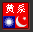
<style>
.page{position:relative;width:33px;height:32px;background:#333333}
.page>*{position:absolute;margin:0}
.t1{font:10.4px "SimSun";color:#ffffff}
</style>
<div class="page">
<p class="t1" style="left:6px;top:4px;width:19px;height:9px">黄系</p>
</div>
